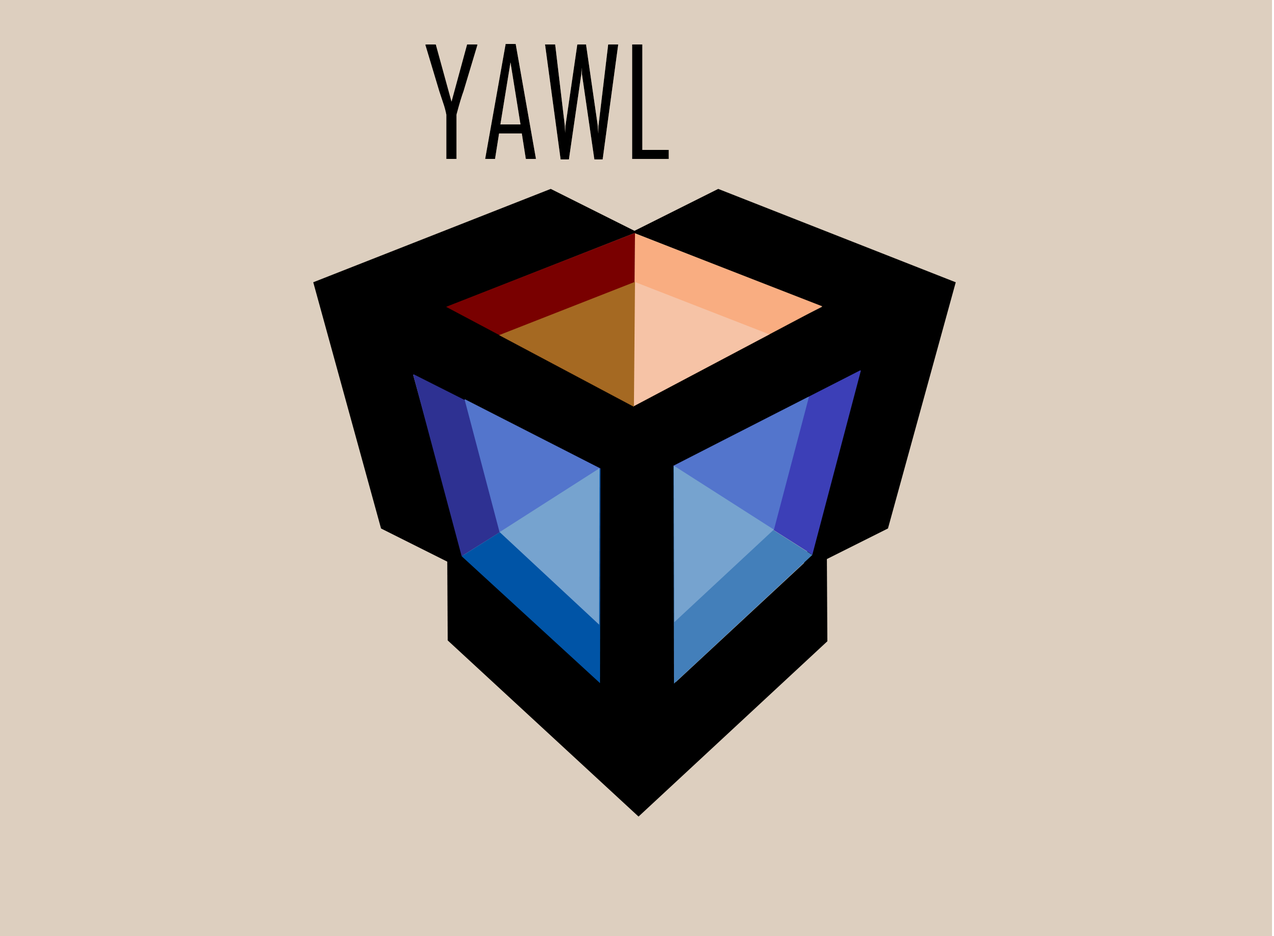
<style>
.page{position:relative;width:1274px;height:936px;background:#ddcfbf}
.page>*{position:absolute;margin:0}
.t1{font:149.9px "AgencyFB-Reg";color:#000000}
</style>
<div class="page">
<p class="t1" style="left:425px;top:44px;width:244px;height:115px">YAWL</p>
</div>
